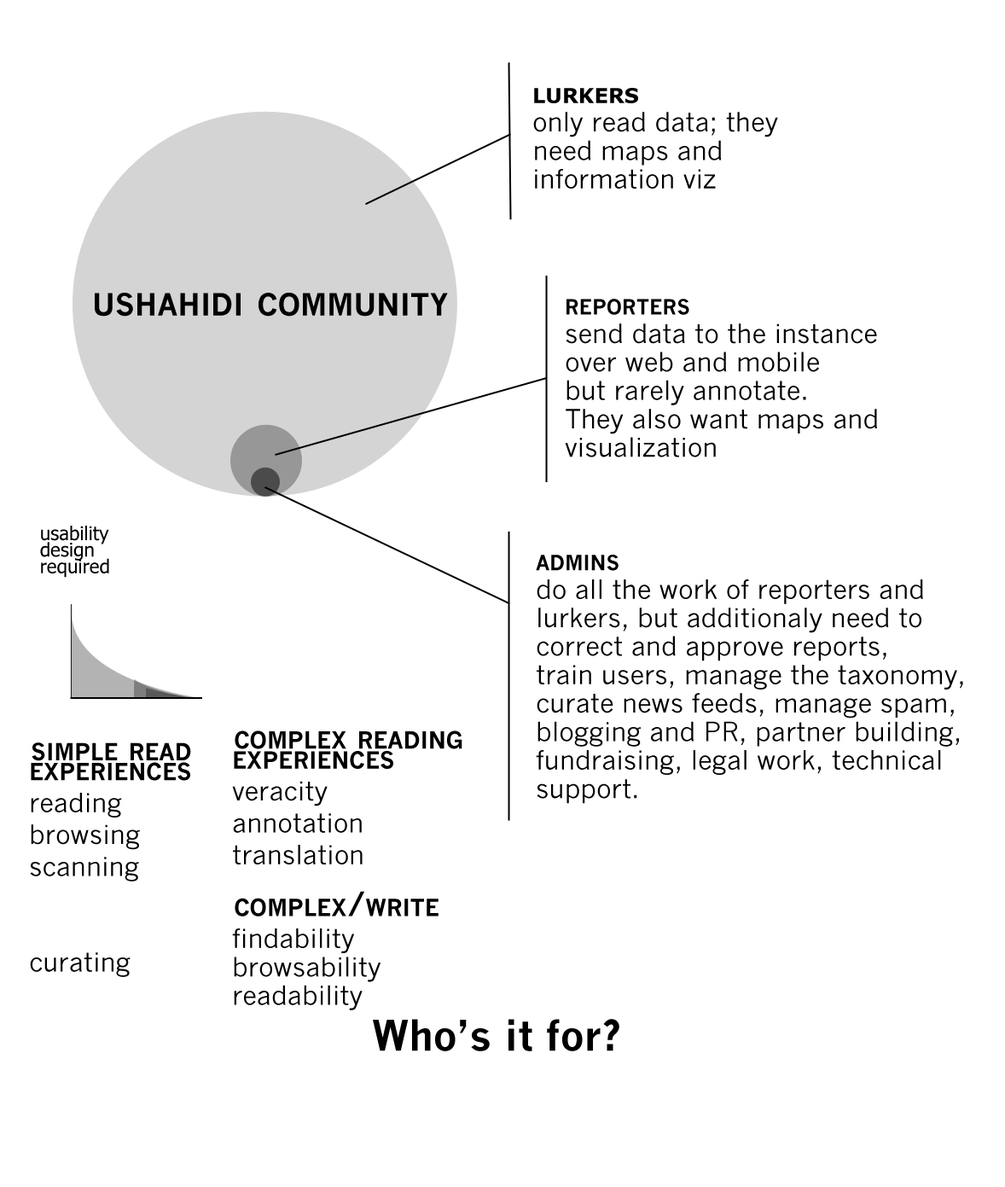
<style>
.page{position:relative;width:1005px;height:1187px;background:#ffffff}
.page>*{position:absolute;margin:0}
.t1{font:26px/28.5px "NewsGothicMT";color:#000000}
.t2{font:29.4px/42.1px "Verdana-Bold";color:#000000;font-variant:small-caps}
.t3{font:43px "NewsGothicMT-Bold";color:#010101;font-variant:small-caps}
.t4{font:29.4px/28.5px "NewsGothicMT-Bold";color:#000000;font-variant:small-caps}
.t5{font:19.2px/16.5px "Tahoma";color:#000000}
.t6{font:26px/31.9px "NewsGothicMT";color:#000000}
.t7{font:32.8px/19.9px "NewsGothicMT-Bold";color:#000000;font-variant:small-caps}
.t8{font:41.3px "NewsGothicMT-Bold";color:#000000}
</style>
<div class="page">
<p class="t1" style="left:533px;top:88px;width:245px;height:101px"><span class="t2">lurkers<br></span>only read data; they <br>need maps and <br>information viz</p>
<p class="t3" style="left:95px;top:293px;width:353px;height:23px">ushahidi community</p>
<p class="t1" style="left:565px;top:299px;width:312px;height:158px"><span class="t4">reporters<br></span>send data to the instance<br>over web and mobile<br>but rarely annotate. <br>They also want maps and<br>visualization</p>
<p class="t5" style="left:40px;top:525px;width:69px;height:53px">usability<br>design <br>required</p>
<p class="t1" style="left:536px;top:554px;width:427px;height:250px"><span class="t4">admins<br></span>do all the work of reporters and<br>lurkers, but additionaly need to <br>correct and approve reports, <br>train users, manage the taxonomy,<br>curate news feeds, manage spam,<br>blogging and PR, partner building,<br>fundraising, legal work, technical<br>support.</p>
<p class="t6" style="left:232px;top:730px;width:230px;height:280px"><span class="t7">complex reading<br>experiences<br></span>veracity<br>annotation<br>translation<br><br><span class="t7">complex/write<br></span>findabi<span class="t1">lity<br>browsability<br>readability</span></p>
<p class="t6" style="left:30px;top:742px;width:161px;height:235px"><span class="t7">simple read<br>experiences<br></span>reading<br>browsing<br>scanning<br><br><br>curating</p>
<p class="t8" style="left:373px;top:1019px;width:246px;height:32px">Who’s it for?</p>
</div>
